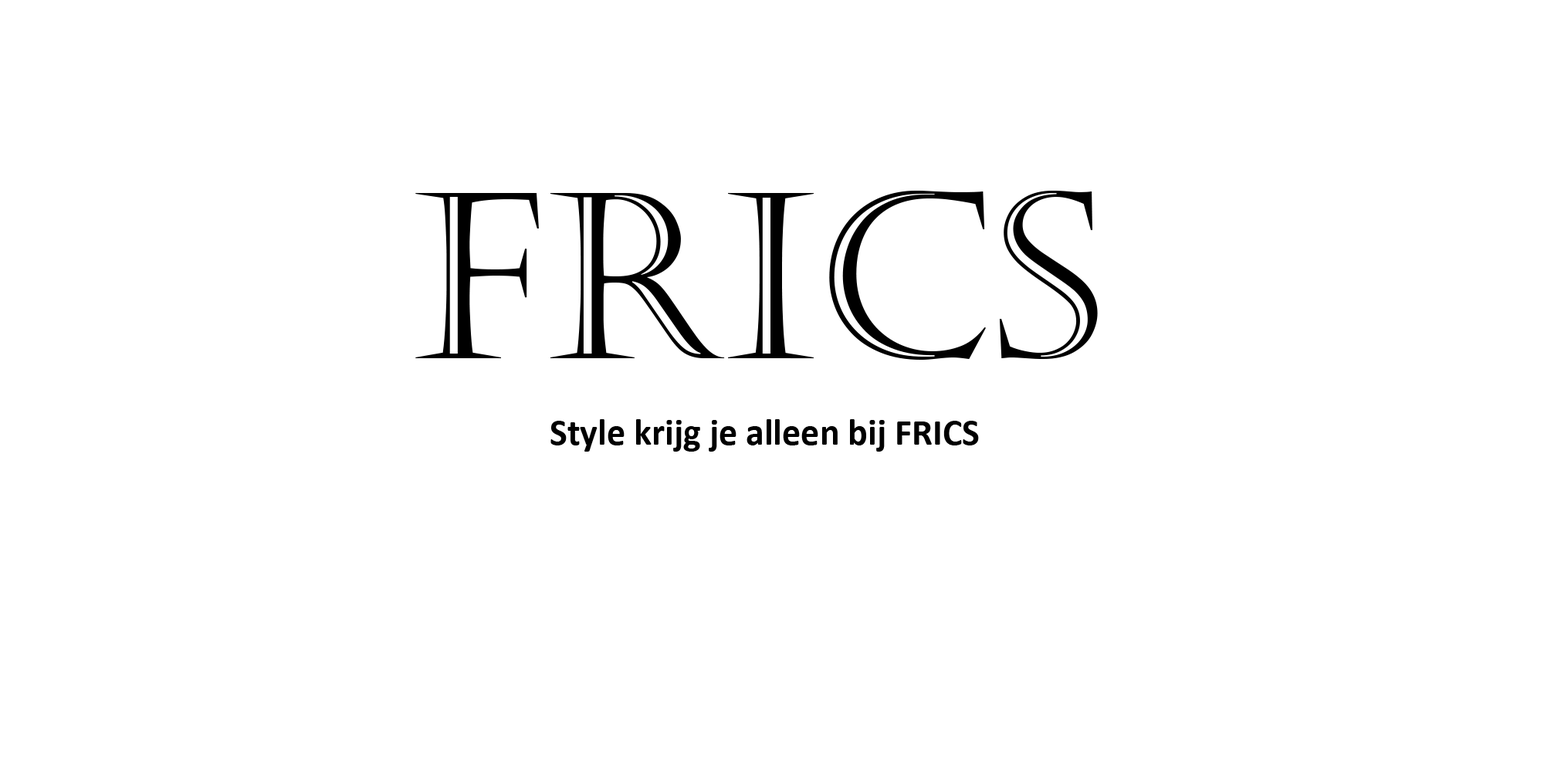
<style>
.page{position:relative;width:1544px;height:772px;background:#ffffff}
.page>*{position:absolute;margin:0}
.t1{font:231.6px "Castellar";color:#000000}
.t2{font:37.1px "Calibri-Bold";color:#000000}
</style>
<div class="page">
<p class="t1" style="left:415px;top:191px;width:683px;height:169px">FRICS</p>
<p class="t2" style="left:551px;top:419px;width:428px;height:33px">Style krijg je alleen bij FRICS</p>
</div>
